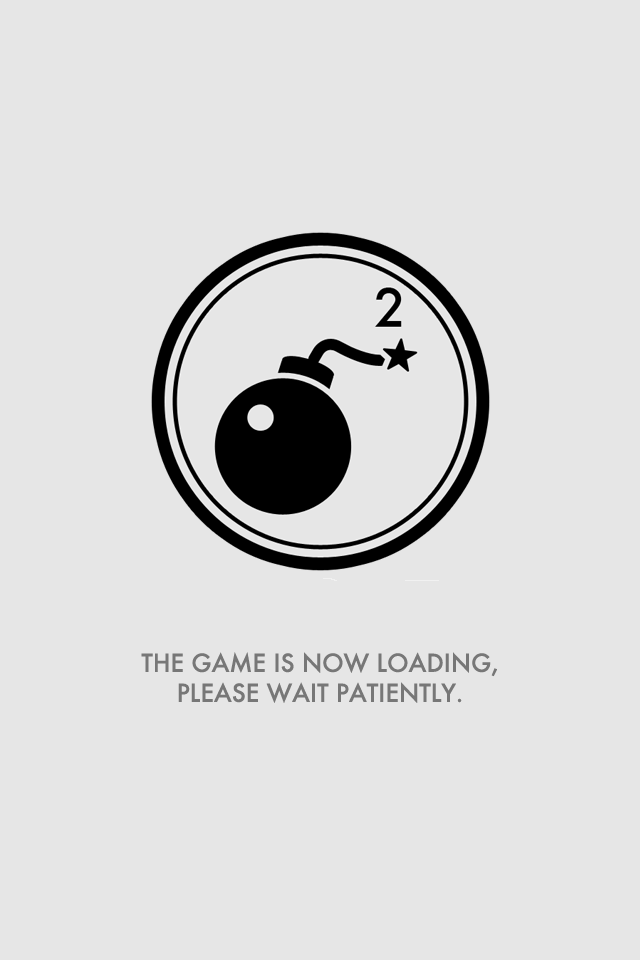
<style>
.page{position:relative;width:640px;height:960px;background:#e6e6e6}
.page>*{position:absolute;margin:0}
.t1{font:24px/30px "Futura-Medium";color:#777777}
</style>
<div class="page">
<p class="t1" style="left:141px;top:652px;width:356px;height:51px;text-align:center">THE GAME IS NOW LOADING,<br>PLEASE WAIT PATIENTLY.</p>
</div>
